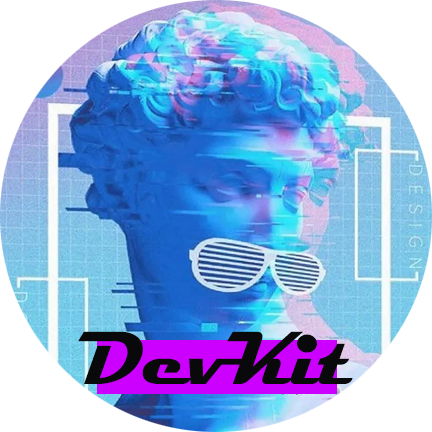
<style>
.page{position:relative;width:432px;height:432px;background:#ffffff}
.page>*{position:absolute;margin:0}
.t1{font:76px "Magneto-Bold";color:#09090b}
</style>
<div class="page">
<p class="t1" style="left:78px;top:331px;width:275px;height:53px">DevKit</p>
</div>
